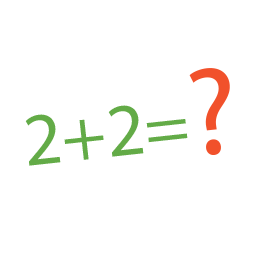
<style>
.page{position:relative;width:256px;height:256px;background:#ffffff}
.page>*{position:absolute;margin:0}
.t1{font:125px "MyriadPro-Regular";color:#f1512b}
.t2{font:75px "MyriadPro-Regular";color:#63ab47}
</style>
<div class="page">
<p class="t1" style="left:189px;top:68px;width:41px;height:87px;rotate:-6deg">?</p>
<p class="t2" style="left:25px;top:105px;width:163px;height:61px;rotate:-6deg">2+2=</p>
</div>
